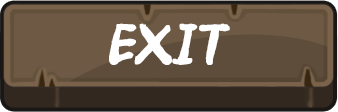
<style>
.page{position:relative;width:338px;height:112px;background:#6e5a44}
.page>*{position:absolute;margin:0}
.t1{font:60px "SangSangFlowerRoad";letter-spacing:-0.025em;color:#ffffff;text-transform:uppercase;font-weight:bold;font-style:italic}
</style>
<div class="page">
<p class="t1" style="left:109px;top:23px;width:121px;height:42px">exit</p>
</div>
